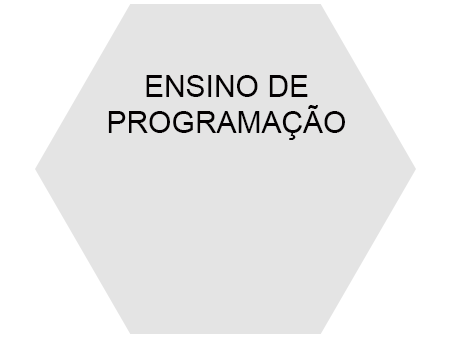
<style>
.page{position:relative;width:454px;height:340px;background:#e4e4e4}
.page>*{position:absolute;margin:0}
.t1{font:30px "ArialMT";color:#030001}
</style>
<div class="page">
<p class="t1" style="left:108px;top:75px;width:237px;height:65px;text-align:center">ENSINO DE PROGRAMAÇÃO</p>
</div>
